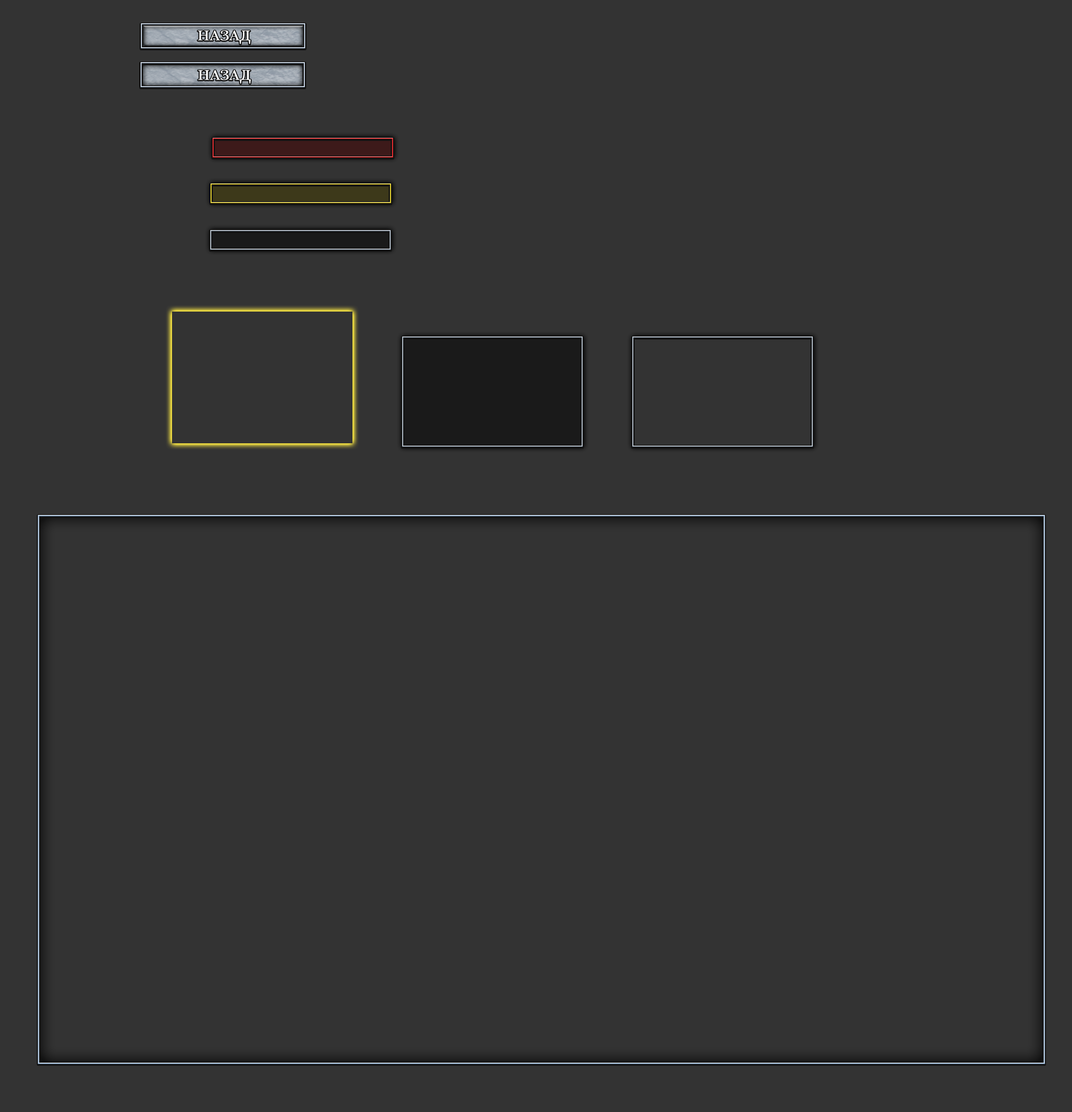
<style>
.page{position:relative;width:1072px;height:1112px;background:#333333}
.page>*{position:absolute;margin:0}
.t1{font:14.6px "Baskerville";color:#ffffff;font-weight:bold}
</style>
<div class="page">
<p class="t1" style="left:198px;top:30px;width:52px;height:14px">НАЗАД</p>
<p class="t1" style="left:198px;top:70px;width:53px;height:14px">НАЗАД</p>
</div>
